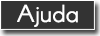
<style>
.page{position:relative;width:100px;height:36px;background:#333333}
.page>*{position:absolute;margin:0}
.t1{font:24px "Arcon-Regular";color:#ffffff}
</style>
<div class="page">
<p class="t1" style="left:17px;top:4px;width:61px;height:23px">Ajuda</p>
</div>
